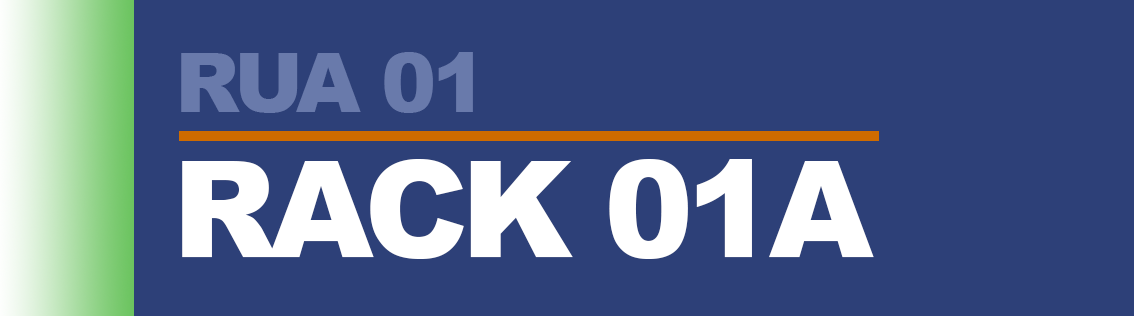
<style>
.page{position:relative;width:1134px;height:316px;background:#2d4078}
.page>*{position:absolute;margin:0}
.t1{font:83.5px "Arial-Black";letter-spacing:-0.05em;color:#6a7bac}
.t2{font:133.7px "Arial-Black";letter-spacing:-0.05em;color:#fefefe}
</style>
<div class="page">
<p class="t1" style="left:181px;top:52px;width:292px;height:61px">RUA 01</p>
<p class="t2" style="left:182px;top:159px;width:692px;height:100px">RACK 01A</p>
</div>
